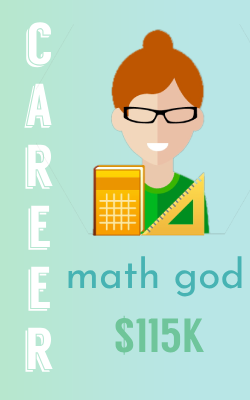
<style>
.page{position:relative;width:250px;height:400px;background:#b8e6e6}
.page>*{position:absolute;margin:0}
.t1{font:59px/57px "Langdon";color:#ffffff}
.t2{font:41px "JosefinSans-Regular";color:#47b3b3}
.t3{font:48px "Langdon";color:#6fc59b}
</style>
<div class="page">
<p class="t1" style="left:24px;top:22px;width:29px;height:350px;text-align:center">c<br>a<br>r<br>e<br>e<br>r</p>
<p class="t2" style="left:68px;top:256px;width:174px;height:41px">math god</p>
<p class="t3" style="left:115px;top:315px;width:89px;height:40px">$115K</p>
</div>
